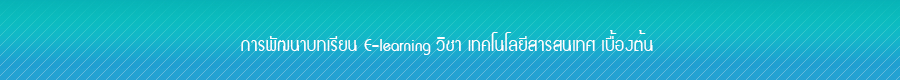
<style>
.page{position:relative;width:900px;height:80px}
.page>*{position:absolute;margin:0}
.t1{font:26px "DSNSingle";color:#ffffff}
</style>
<div class="page">
<p class="t1" style="left:241px;top:30px;width:412px;height:25px">การพัฒนาบทเรียน E-learning วิชา เทคโนโลยีสารสนเทศ เบื้องต้น</p>
</div>
